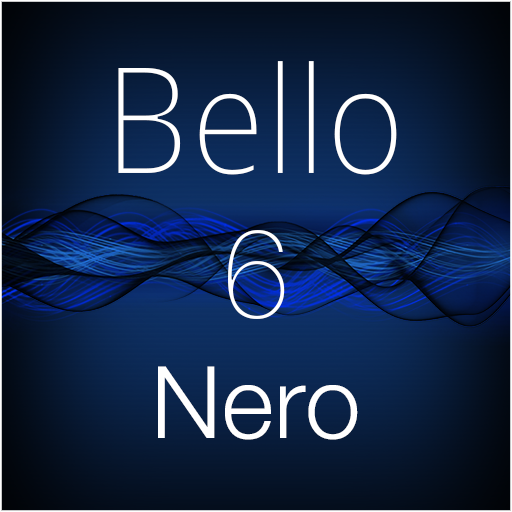
<style>
.page{position:relative;width:512px;height:512px}
.page>*{position:absolute;margin:0}
.t1{font:150px "OpenSans-Light";color:#ffffff}
.t2{font:120px "OpenSans-Light";color:#ffffff}
.t3{font:100px "OpenSans";color:#ffffff}
</style>
<div class="page">
<p class="t1" style="left:118px;top:61px;width:279px;height:379px;text-align:center">Bello<br><span class="t2">6<br></span><span class="t3">Nero</span></p>
</div>
